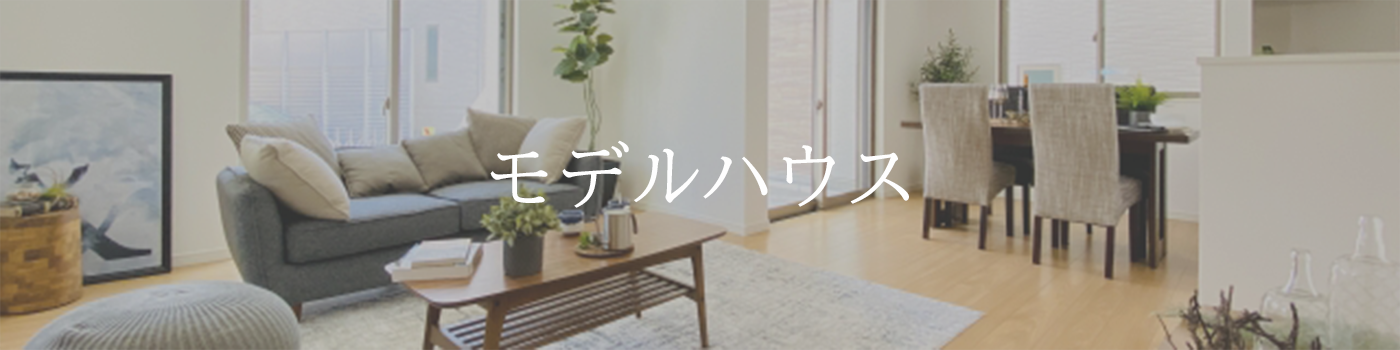
<style>
.page{position:relative;width:1400px;height:350px}
.page>*{position:absolute;margin:0}
.t1{font:72px "BIZ-UDMincho-Medium";color:#fefefe}
</style>
<div class="page">
<p class="t1" style="left:490px;top:140px;width:419px;height:68px">モデルハウス</p>
</div>
